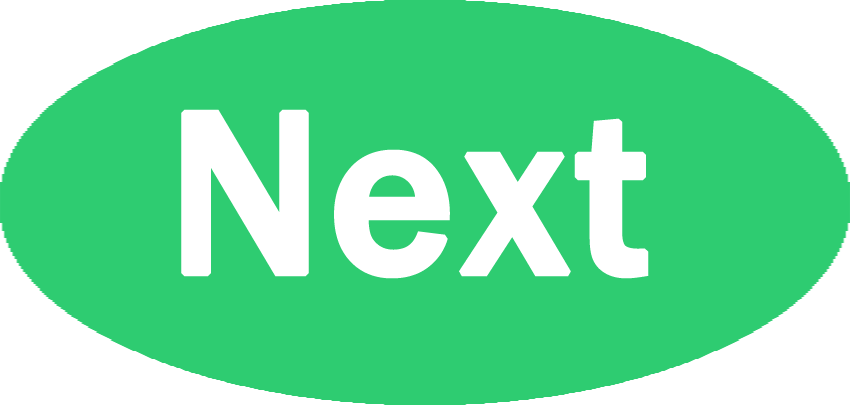
<style>
.page{position:relative;width:850px;height:405px;background:#2ecc71}
.page>*{position:absolute;margin:0}
.t1{font:240px "FranklinGothic-Medium";color:#ffffff;font-weight:bold}
</style>
<div class="page">
<p class="t1" style="left:181px;top:109px;width:468px;height:170px">Next</p>
</div>
